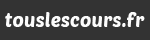
<style>
.page{position:relative;width:150px;height:40px;background:#333333}
.page>*{position:absolute;margin:0}
.t1{font:19.4px "PoetsenOne-Regular";color:#fcfcfc}
</style>
<div class="page">
<p class="t1" style="left:5px;top:12px;width:140px;height:15px">touslescours.fr</p>
</div>
